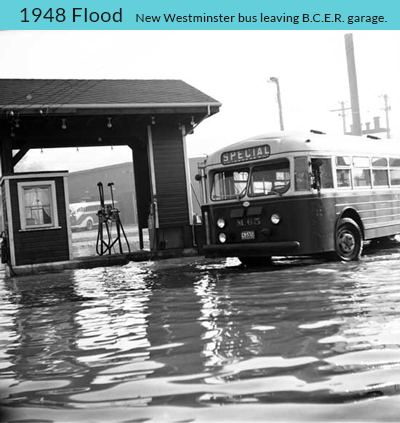
<style>
.page{position:relative;width:400px;height:423px}
.page>*{position:absolute;margin:0}
.t1{font:20px "Lato-Regular";letter-spacing:0.025em;color:#1a1a1a}
.t2{font:12px "Lato-Regular";letter-spacing:0.025em;color:#1a1a1a}
</style>
<div class="page">
<p class="t1" style="left:20px;top:8px;width:102px;height:14px">1948 Flood</p>
<p class="t2" style="left:136px;top:13px;width:251px;height:11px">New Westminster bus leaving B.C.E.R. garage.</p>
</div>
